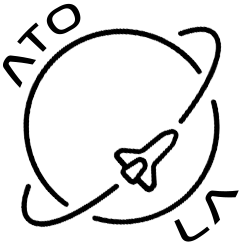
<style>
.page{position:relative;width:243px;height:245px;background:#ffffff}
.page>*{position:absolute;margin:0}
.t1{font:38px "NasalizationRg-Regular";letter-spacing:0.08em;color:#000000}
</style>
<div class="page">
<p class="t1" style="left:3px;top:3px;width:78px;height:85px;rotate:-44deg">ATO</p>
<p class="t1" style="left:174px;top:190px;width:65px;height:52px;rotate:-46deg">LA</p>
</div>
